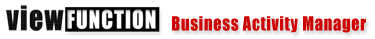
<style>
.page{position:relative;width:375px;height:39px;background:#ffffff}
.page>*{position:absolute;margin:0}
.t1{font:18px "Impact";letter-spacing:0.05em;color:#ce0000;scale:0.9 1}
</style>
<div class="page">
<p class="t1" style="left:172px;top:16px;width:194px;height:17px">Business Activity Manager</p>
</div>
